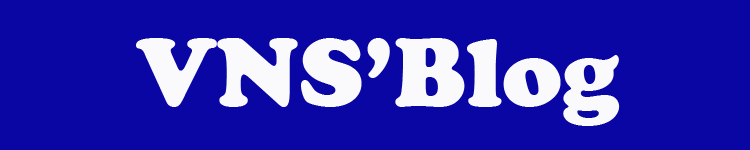
<style>
.page{position:relative;width:750px;height:150px;background:#0906a3}
.page>*{position:absolute;margin:0}
.t1{font:100px "CooperBlack";color:#fafafd}
</style>
<div class="page">
<p class="t1" style="left:136px;top:38px;width:484px;height:88px">VNS’Blog</p>
</div>
